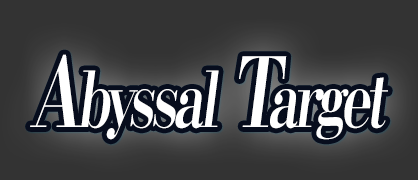
<style>
.page{position:relative;width:418px;height:180px;background:#333333}
.page>*{position:absolute;margin:0}
.t1{font:76.8px "KochoStd-Heavy";letter-spacing:-0.08em;color:#ffffff;font-style:italic;scale:0.72 1}
.t2{font:96px "KochoStd-Heavy";letter-spacing:-0.08em;color:#ffffff;font-style:italic;scale:0.72 1}
</style>
<div class="page">
<p class="t1" style="left:30px;top:54px;width:358px;height:86px"><span class="t2">A</span>byssal<span class="t2"> T</span>arget</p>
</div>
